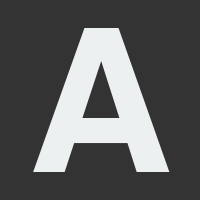
<style>
.page{position:relative;width:200px;height:200px;background:#333333}
.page>*{position:absolute;margin:0}
.t1{font:200px "Helvetica-Bold";letter-spacing:-0.05em;color:#ecf0f1}
</style>
<div class="page">
<p class="t1" style="left:33px;top:28px;width:137px;height:144px">A</p>
</div>
